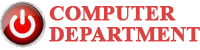
<style>
.page{position:relative;width:200px;height:50px;background:#ffffff}
.page>*{position:absolute;margin:0}
.t1{font:20.8px/20.9px "TimesNewRomanPS-BoldMT";color:#db4242;font-weight:bold}
</style>
<div class="page">
<p class="t1" style="left:49px;top:6px;width:151px;height:36px">COMPUTER <br>DEPARTMENT</p>
</div>
